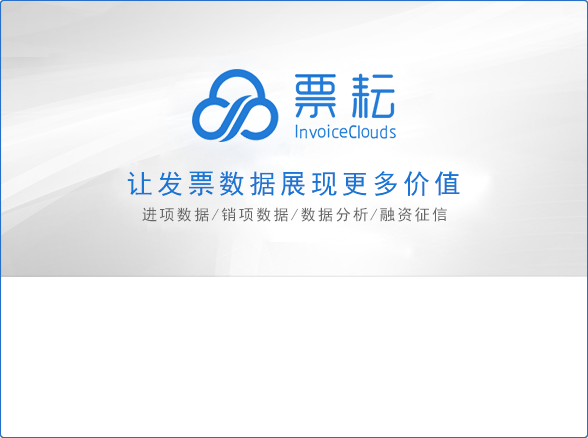
<style>
.page{position:relative;width:588px;height:438px;background:#ffffff}
.page>*{position:absolute;margin:0}
.t1{font:27.5px "SimHei";letter-spacing:0.12em;color:#1a76d4}
.t2{font:15.5px "SimHei";letter-spacing:0.12em;color:#666666}
</style>
<div class="page">
<p class="t1" style="left:127px;top:171px;width:333px;height:25px">让发票数据展现更多价值</p>
<p class="t2" style="left:142px;top:207px;width:305px;height:15px">进项数据/销项数据/数据分析/融资征信</p>
</div>
